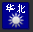
<style>
.page{position:relative;width:33px;height:32px;background:#000090}
.page>*{position:absolute;margin:0}
.t1{font:10.4px "SimSun";color:#ffffff}
</style>
<div class="page">
<p class="t1" style="left:6px;top:4px;width:19px;height:9px">华北</p>
</div>
